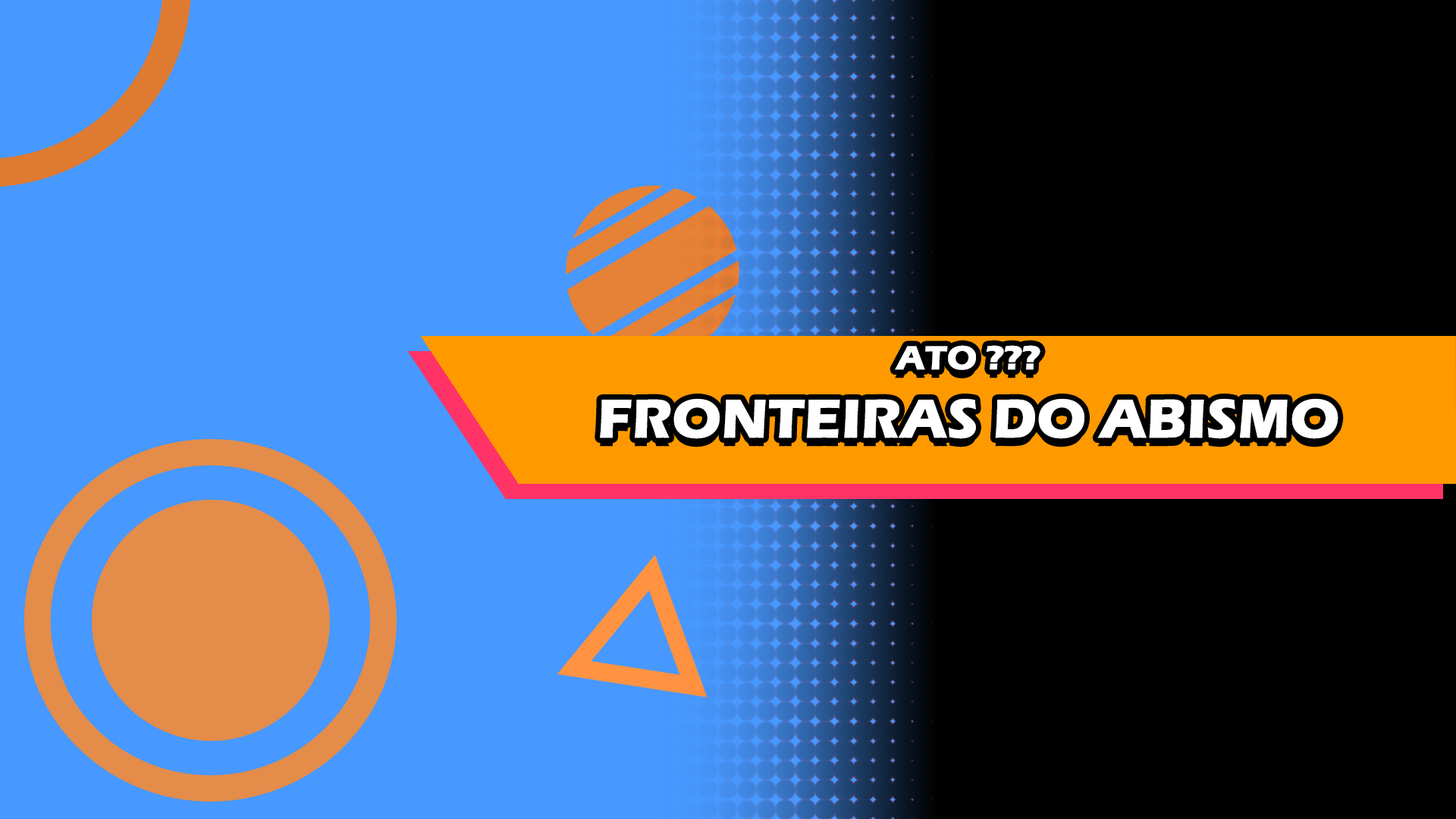
<style>
.page{position:relative;width:1456px;height:819px;background:#4798ff}
.page>*{position:absolute;margin:0}
.t1{font:56.9px "ErasITC-Bold";color:#ffffff}
.t2{font:34.8px "ErasITC-Bold";color:#ffffff}
</style>
<div class="page">
<p class="t1" style="left:600px;top:345px;width:738px;height:94px;text-align:center"><span class="t2">ATO ???<br></span>FRONTEIRAS DO ABISMO</p>
</div>
